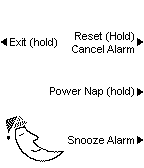
<style>
.page{position:relative;width:144px;height:168px;background:#ffffff}
.page>*{position:absolute;margin:0}
.t1{font:11px "ArialMT";color:#000000}
</style>
<div class="page">
<p class="t1" style="left:10px;top:38px;width:47px;height:10px">Exit (hold)</p>
<p class="t1" style="left:72px;top:32px;width:62px;height:21px;text-align:right">Reset (Hold)<br>Cancel Alarm</p>
<p class="t1" style="left:50px;top:87px;width:84px;height:10px">Power Nap (hold)</p>
<p class="t1" style="left:68px;top:136px;width:66px;height:8px">Snooze Alarm</p>
</div>
